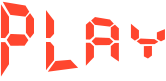
<style>
.page{position:relative;width:166px;height:81px;background:#ffffff}
.page>*{position:absolute;margin:0}
.t1{font:75px "QuartzMS";color:#ff462e;scale:0.96 1}
</style>
<div class="page">
<p class="t1" style="left:0px;top:1px;width:165px;height:76px">PLAY</p>
</div>
